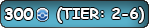
<style>
.page{position:relative;width:149px;height:28px}
.page>*{position:absolute;margin:0}
.t1{font:12px "ComicSansMS-Bold";color:#ffffff}
.t2{font:14.7px "ComicSansMS-Bold";color:#ffffff}
</style>
<div class="page">
<p class="t1" style="left:4px;top:8px;width:30px;height:12px">300</p>
<p class="t2" style="left:57px;top:7px;width:87px;height:16px">(TIER: 2-6)</p>
</div>
